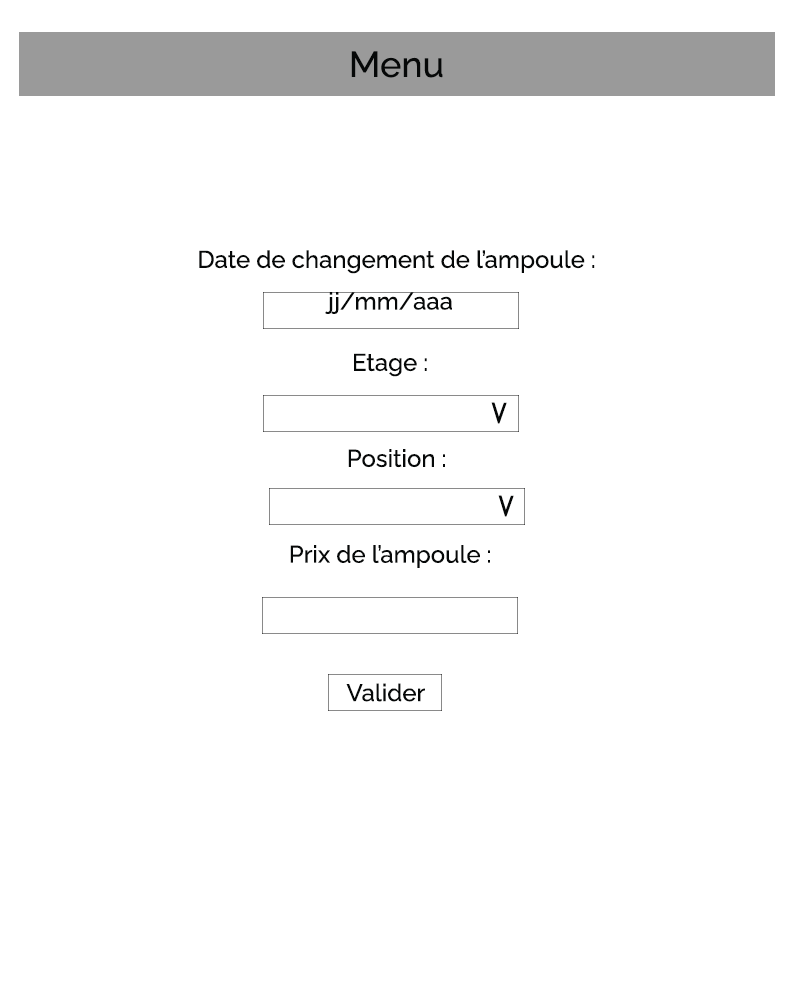
<style>
.page{position:relative;width:800px;height:1000px;background:#ffffff}
.page>*{position:absolute;margin:0}
.t1{font:36px "Raleway-Medium";color:#060808}
.t2{font:24px "Raleway-Medium";color:#060808}
.t3{font:26.9px "Raleway-Medium";color:#060808;scale:1.82 1}
</style>
<div class="page">
<p class="t1" style="left:351px;top:51px;width:92px;height:27px">Menu</p>
<p class="t2" style="left:199px;top:250px;width:396px;height:24px">Date de changement de l’ampoule :</p>
<p class="t2" style="left:325px;top:292px;width:127px;height:22px">jj/mm/aaa</p>
<p class="t2" style="left:354px;top:353px;width:73px;height:24px">Etage :</p>
<p class="t3" style="left:491px;top:402px;width:16px;height:22px;rotate:-89deg">&lt;</p>
<p class="t2" style="left:348px;top:449px;width:97px;height:19px">Position :</p>
<p class="t3" style="left:498px;top:495px;width:16px;height:22px;rotate:-89deg">&lt;</p>
<p class="t2" style="left:290px;top:545px;width:200px;height:23px">Prix de l’ampoule :</p>
<p class="t2" style="left:346px;top:683px;width:79px;height:19px">Valider</p>
</div>
